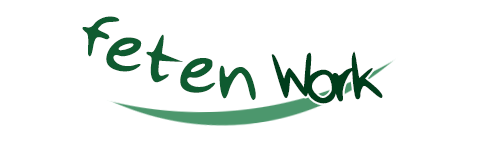
<style>
.page{position:relative;width:482px;height:142px;background:#ffffff}
.page>*{position:absolute;margin:0}
.t1{font:81.2px "HappyHand";color:#0f5b30}
.t2{font:81px "HappyHand";letter-spacing:-0.075em;color:#003d1b}
</style>
<div class="page">
<p class="t1" style="left:82px;top:16px;width:174px;height:84px;rotate:16deg">feteén</p>
<p class="t2" style="left:271px;top:51px;width:112px;height:53px">Work</p>
</div>
